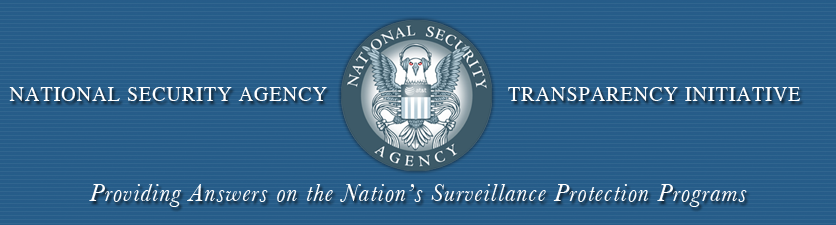
<style>
.page{position:relative;width:836px;height:225px;background:#275c89}
.page>*{position:absolute;margin:0}
.t1{font:20px "Times-Roman";letter-spacing:0.05em;color:#ffffff}
.t2{font:25px "Baskerville-Italic";letter-spacing:0.05em;color:#ffffff}
</style>
<div class="page">
<p class="t1" style="left:9px;top:87px;width:318px;height:14px">NATIONAL SECURITY AGENCY</p>
<p class="t1" style="left:508px;top:87px;width:292px;height:14px">TRANSPARENCY INITIATIVE</p>
<p class="t2" style="left:89px;top:184px;width:658px;height:23px">Providing Answers on the Nation’s Surveillance Protection Programs</p>
</div>
